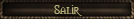
<style>
.page{position:relative;width:134px;height:19px}
.page>*{position:absolute;margin:0}
.t1{font:12px "Morpheus";color:#b9b27c}
</style>
<div class="page">
<p class="t1" style="left:54px;top:5px;width:28px;height:11px">Salir</p>
</div>
